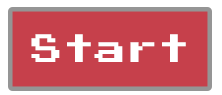
<style>
.page{position:relative;width:222px;height:95px;background:#c6404b}
.page>*{position:absolute;margin:0}
.t1{font:31.7px "PressStart2P";color:#ffffff}
</style>
<div class="page">
<p class="t1" style="left:31px;top:34px;width:155px;height:28px">Start</p>
</div>
